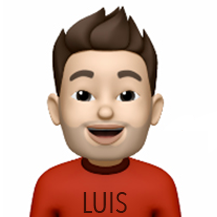
<style>
.page{position:relative;width:217px;height:217px;background:#fefefe}
.page>*{position:absolute;margin:0}
.t1{font:30px "AvenirNextCondensed-Regular";color:#3f0f06}
</style>
<div class="page">
<p class="t1" style="left:83px;top:192px;width:44px;height:21px">LUIS</p>
</div>
